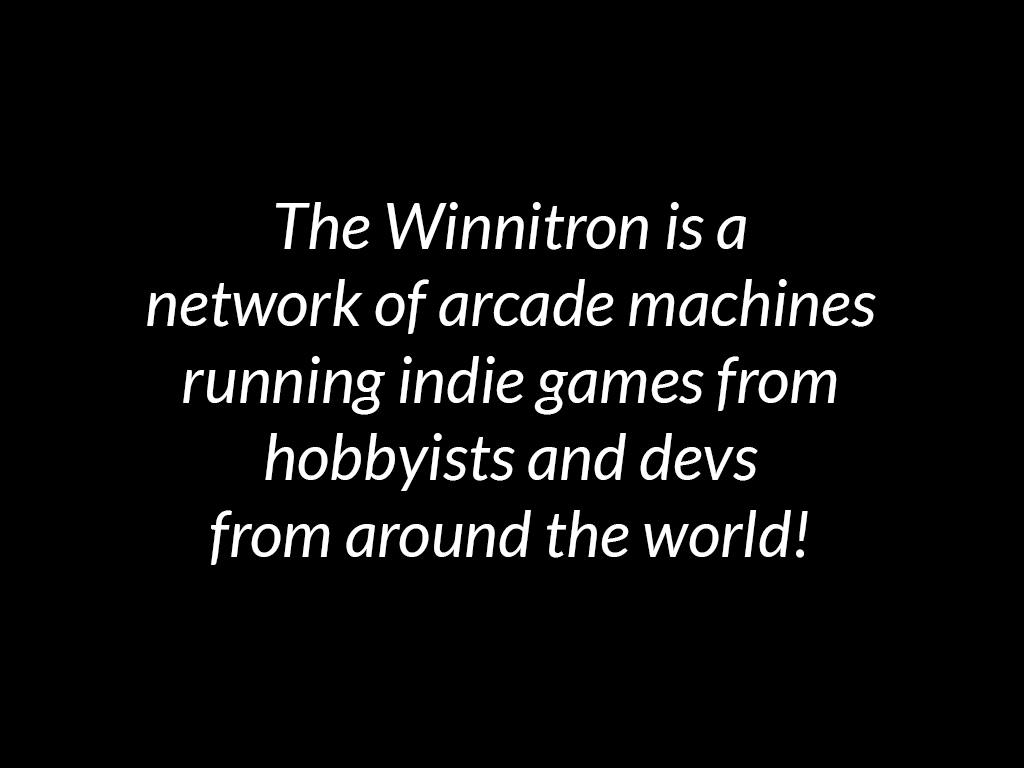
<style>
.page{position:relative;width:1024px;height:768px;background:#000000}
.page>*{position:absolute;margin:0}
.t1{font:64.1px "Lato-Italic";color:#ffffff}
</style>
<div class="page">
<p class="t1" style="left:147px;top:202px;width:729px;height:363px;text-align:center">The Winnitron is a<br>network of arcade machines<br>running indie games from<br>hobbyists and devs<br>from around the world!</p>
</div>
